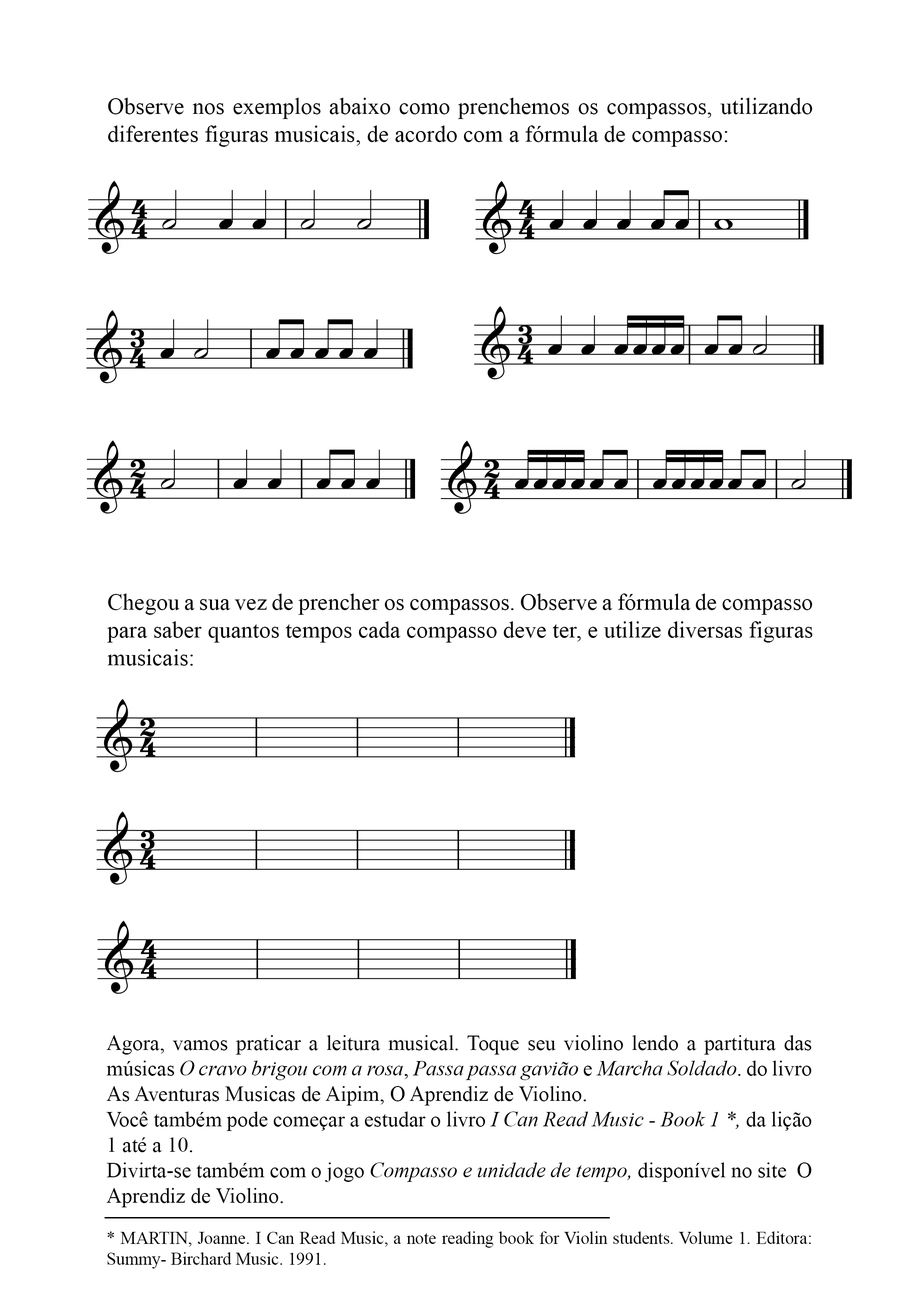
<style>
.page{position:relative;width:918px;height:1299px;background:#ffffff}
.page>*{position:absolute;margin:0}
.t1{font:23.1px "TimesNewRomanPSMT";color:#000000}
.t2{font:21.2px "TimesNewRomanPSMT";color:#000000}
.t3{font:21.2px "TimesNewRomanPS-ItalicMT";color:#000000}
.t4{font:17.4px "TimesNewRomanPSMT";color:#000000}
</style>
<div class="page">
<p class="t1" style="left:108px;top:98px;width:705px;height:49px;text-align:justify">Observe nos exemplos abaixo como prenchemos os compassos, utilizando diferentes figuras musicais, de acordo com a fórmula de compasso:</p>
<p class="t1" style="left:107px;top:593px;width:706px;height:73px;text-align:justify">Chegou a sua vez de prencher os compassos. Observe a fórmula de compasso para saber quantos tempos cada compasso deve ter, e utilize diversas figuras musicais:</p>
<p class="t2" style="left:106px;top:1035px;width:706px;height:172px;text-align:justify">Agora, vamos praticar a leitura musical. Toque seu violino lendo a partitura das músicas <span class="t3">O cravo brigou com a rosa</span>, <span class="t3">Passa passa gavião</span> e <span class="t3">Marcha Soldado</span>. do livro As Aventuras Musicas de Aipim, O Aprendiz de Violino.<br>Você também pode começar a estudar o livro <span class="t3">I Can Read Music - Book 1 *,</span> da lição 1 até a 10.<br>Divirta-se também com o jogo <span class="t3">Compasso e unidade de tempo, </span>disponível no site  O Aprendiz de Violino.</p>
<p class="t4" style="left:107px;top:1231px;width:704px;height:37px;text-align:justify">* MARTIN, Joanne. I Can Read Music, a note reading book for Violin students. Volume 1. Editora: Summy- Birchard Music. 1991.</p>
</div>
